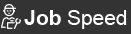
<style>
.page{position:relative;width:131px;height:34px;background:#333333}
.page>*{position:absolute;margin:0}
.t1{font:21.1px "ArialMT";letter-spacing:-0.006em;color:#ffffff}
.t2{font:21.1px "Arial-BoldMT";letter-spacing:-0.006em;color:#ffffff}
</style>
<div class="page">
<p class="t1" style="left:24px;top:10px;width:103px;height:19px"><span class="t2">Job</span> Speed</p>
</div>
